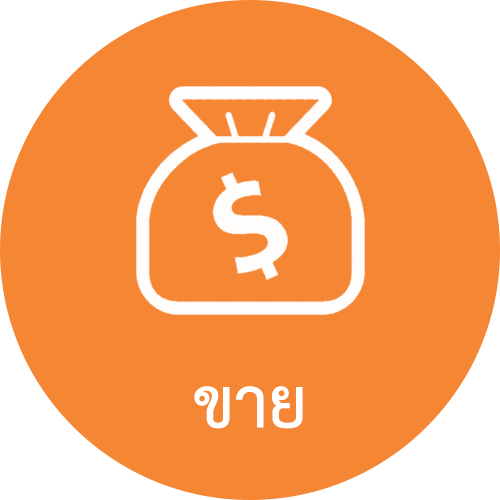
<style>
.page{position:relative;width:500px;height:500px;background:#f58634}
.page>*{position:absolute;margin:0}
.t1{font:100.9px "THSarabunPSK-Bold";color:#ffffff}
</style>
<div class="page">
<p class="t1" style="left:194px;top:386px;width:109px;height:43px">ขาย</p>
</div>
